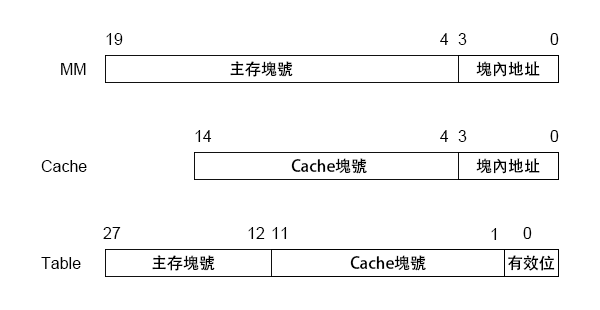
<style>
.page{position:relative;width:600px;height:310px;background:#ffffff}
.page>*{position:absolute;margin:0}
.t1{font:12px "ArialMT";color:#000000}
.t2{font:12px "AdobeHeitiStd-Regular";color:#000000}
</style>
<div class="page">
<p class="t1" style="left:106px;top:33px;width:17px;height:12px">19</p>
<p class="t1" style="left:440px;top:33px;width:9px;height:12px">4</p>
<p class="t1" style="left:458px;top:33px;width:9px;height:12px">3</p>
<p class="t1" style="left:550px;top:33px;width:9px;height:12px">0</p>
<p class="t1" style="left:61px;top:63px;width:25px;height:12px">MM</p>
<p class="t2" style="left:230px;top:61px;width:63px;height:16px">主存塊號</p>
<p class="t2" style="left:476px;top:61px;width:64px;height:16px">塊內地址</p>
<p class="t1" style="left:195px;top:130px;width:17px;height:12px">14</p>
<p class="t1" style="left:440px;top:130px;width:9px;height:12px">4</p>
<p class="t1" style="left:458px;top:130px;width:9px;height:12px">3</p>
<p class="t1" style="left:550px;top:130px;width:9px;height:12px">0</p>
<p class="t1" style="left:41px;top:160px;width:46px;height:12px">Cache</p>
<p class="t2" style="left:291px;top:158px;width:76px;height:16px">Cache塊號</p>
<p class="t2" style="left:476px;top:158px;width:64px;height:16px">塊內地址</p>
<p class="t1" style="left:103px;top:227px;width:18px;height:12px">27</p>
<p class="t1" style="left:248px;top:227px;width:17px;height:12px">12</p>
<p class="t1" style="left:272px;top:227px;width:15px;height:12px">11</p>
<p class="t1" style="left:491px;top:228px;width:6px;height:12px">1</p>
<p class="t1" style="left:523px;top:227px;width:9px;height:12px">0</p>
<p class="t1" style="left:41px;top:257px;width:40px;height:12px">Table</p>
<p class="t2" style="left:152px;top:255px;width:63px;height:16px">主存塊號</p>
<p class="t2" style="left:350px;top:255px;width:76px;height:16px">Cache塊號</p>
<p class="t2" style="left:508px;top:255px;width:47px;height:16px">有效位</p>
</div>
